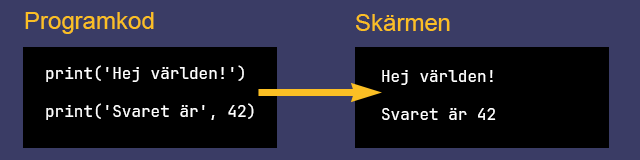
<style>
.page{position:relative;width:640px;height:160px;background:#000000}
.page>*{position:absolute;margin:0}
.t1{font:24px "ArialMT";color:#fbbf24}
.t2{font:16px "JetBrainsMono-Regular";color:#ffffff}
</style>
<div class="page">
<p class="t1" style="left:25px;top:12px;width:129px;height:22px">Programkod</p>
<p class="t1" style="left:356px;top:14px;width:94px;height:17px">Skärmen</p>
<p class="t2" style="left:46px;top:65px;width:208px;height:55px">print('Hej världen!')<br><br>print('Svaret är', 42)</p>
<p class="t2" style="left:382px;top:70px;width:114px;height:50px">Hej världen!<br><br>Svaret är 42</p>
</div>
